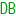
<style>
.page{position:relative;width:16px;height:16px;background:#ffffff}
.page>*{position:absolute;margin:0}
.t1{font:16px "LetterGothicStd";color:#00980e}
</style>
<div class="page">
<p class="t1" style="left:0px;top:2px;width:8px;height:12px">D</p>
<p class="t1" style="left:8px;top:2px;width:8px;height:12px">B</p>
</div>
